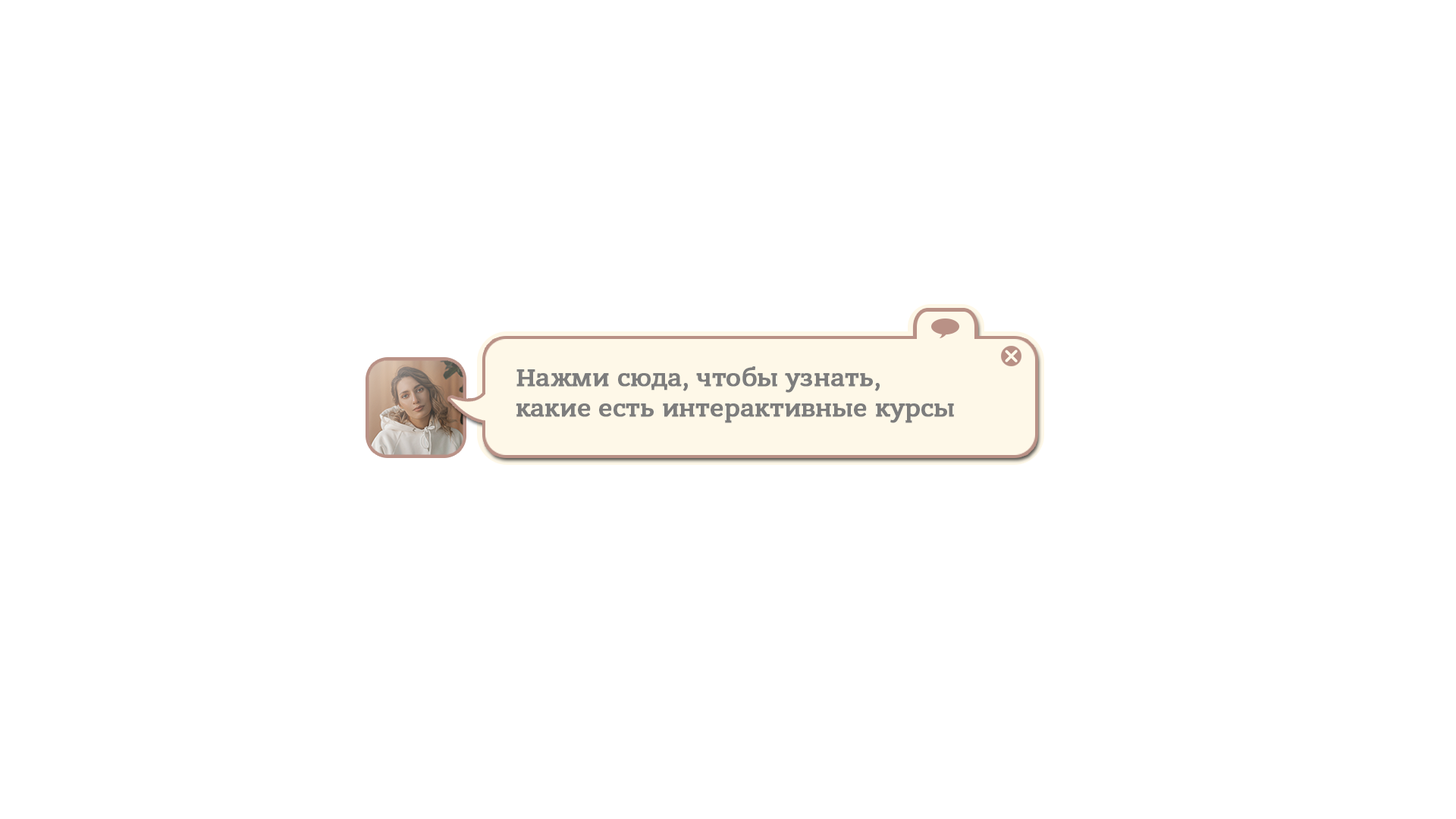
<style>
.page{position:relative;width:1456px;height:819px;background:#ffffff}
.page>*{position:absolute;margin:0}
.t1{font:25.3px "BanderaProMedium";color:#7d7d7d;font-weight:bold}
</style>
<div class="page">
<p class="t1" style="left:516px;top:366px;width:438px;height:57px">Нажми сюда, чтобы узнать,<br>какие есть интерактивные курсы</p>
</div>
